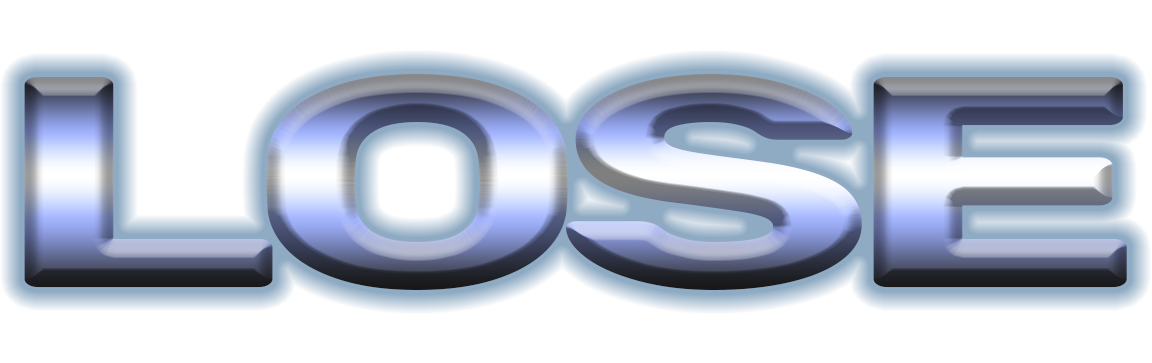
<style>
.page{position:relative;width:1152px;height:363px;background:#ffffff}
.page>*{position:absolute;margin:0}
.t1{font:300px "Rubik-Bold";letter-spacing:-0.075em;scale:1.6 1}
</style>
<div class="page">
<p class="t1" style="left:24px;top:74px;width:1103px;height:216px">LOSE</p>
</div>
